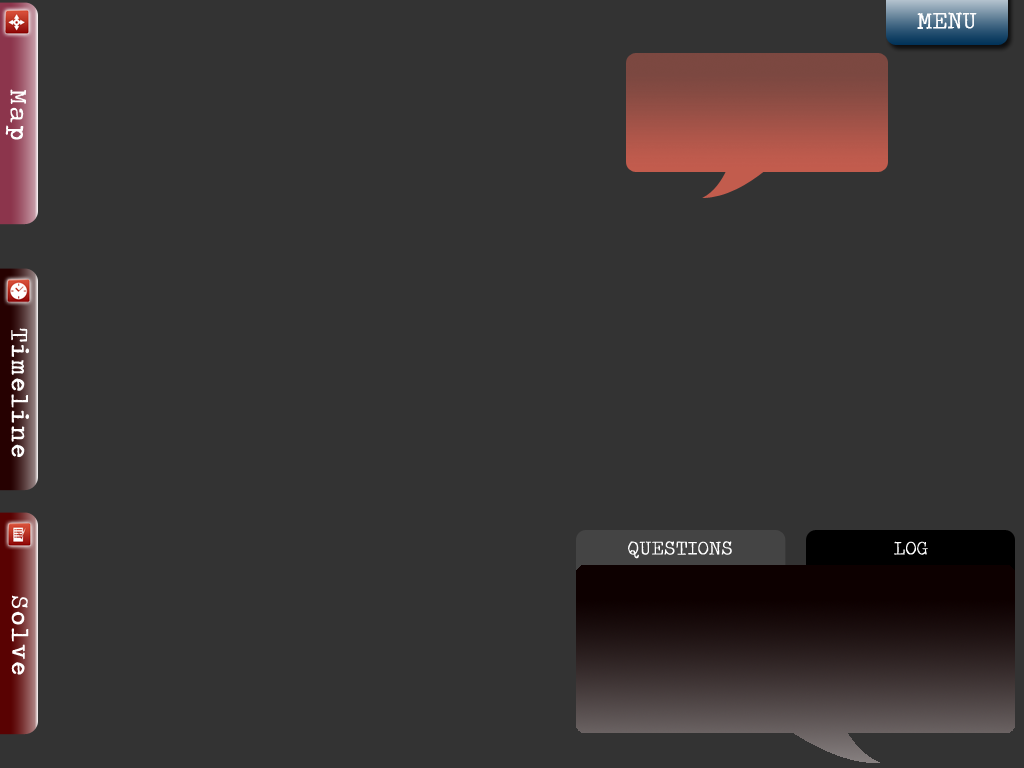
<style>
.page{position:relative;width:1024px;height:768px;background:#333333}
.page>*{position:absolute;margin:0}
.t1{font:24px "TravelingTypewriter";color:#fefeff;font-weight:bold}
.t2{font:24px "TravelingTypewriter";letter-spacing:0.1em;color:#ffffff;font-weight:bold}
.t3{font:20px "TravelingTypewriter";color:#ffffff;font-weight:bold}
</style>
<div class="page">
<p class="t1" style="left:917px;top:12px;width:60px;height:17px">MENU</p>
<p class="t2" style="left:5px;top:89px;width:21px;height:51px;rotate:90deg">Map</p>
<p class="t2" style="left:11px;top:328px;width:18px;height:129px;rotate:90deg">Timeline</p>
<p class="t3" style="left:628px;top:541px;width:104px;height:18px">QUESTIONS</p>
<p class="t3" style="left:894px;top:541px;width:34px;height:14px">LOG</p>
<p class="t2" style="left:11px;top:595px;width:18px;height:80px;rotate:90deg">Solve</p>
</div>
